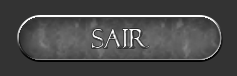
<style>
.page{position:relative;width:237px;height:76px;background:#333333}
.page>*{position:absolute;margin:0}
.t1{font:26px "FelixTitlingMT"}
</style>
<div class="page">
<p class="t1" style="left:92px;top:29px;width:57px;height:19px">sair</p>
</div>
